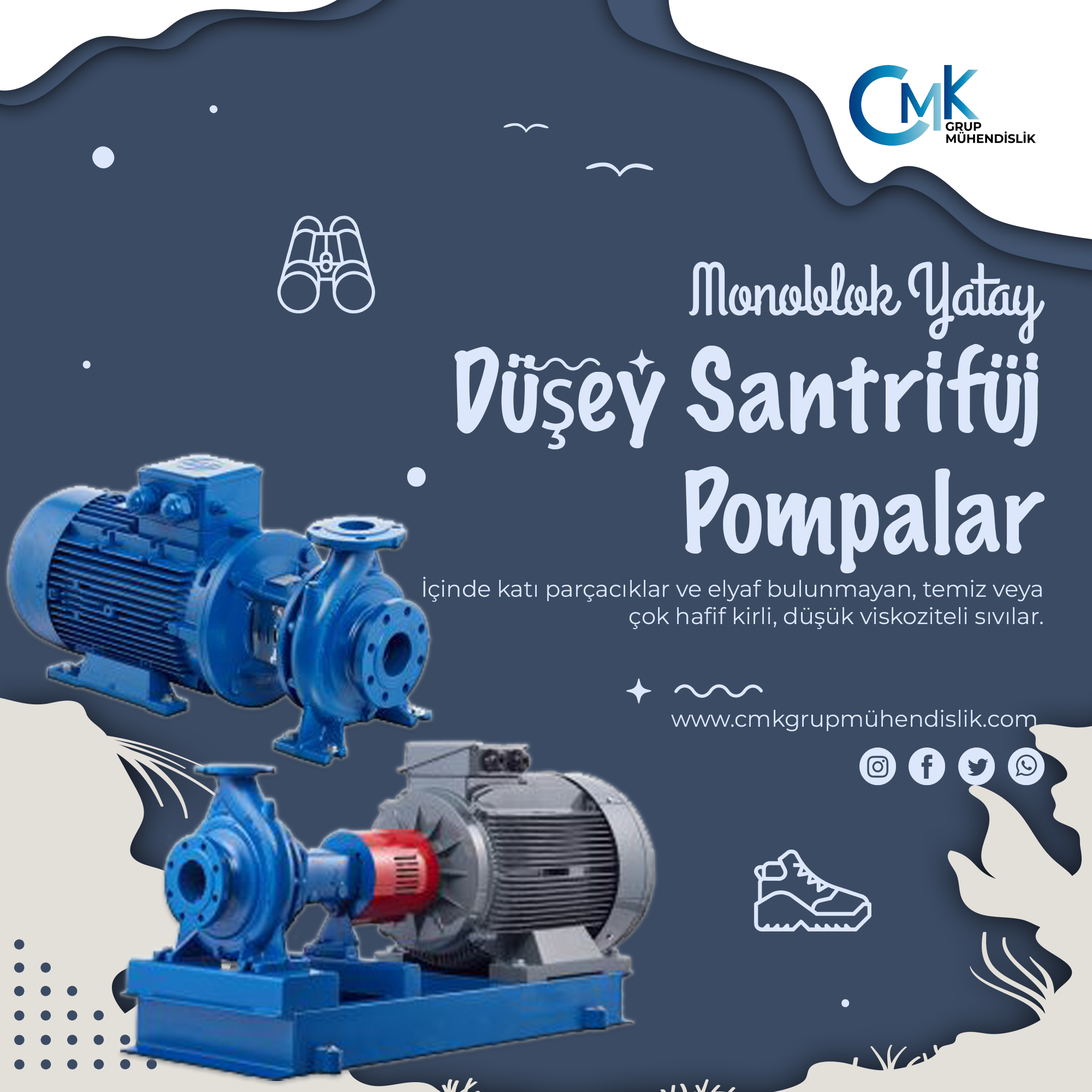
<style>
.page{position:relative;width:1092px;height:1092px;background:#3b4b64}
.page>*{position:absolute;margin:0}
.t1{font:73.8px "GrandHotel-Regular";letter-spacing:-0.025em;color:#dde7fb}
.t2{font:101.5px "MarkerFelt-Thin";letter-spacing:-0.025em;color:#dde7fb}
.t3{font:101.5px "MyriadPro-Regular";letter-spacing:-0.025em;color:#dde7fb}
.t4{font:22.7px "Montserrat-Regular";color:#dde7fb}
</style>
<div class="page">
<p class="t1" style="left:688px;top:262px;width:357px;height:82px">Monoblok Yatay</p>
<p class="t2" style="left:454px;top:344px;width:591px;height:229px;text-align:right">Dü<span class="t3">ş</span>ey Santrifüj<br>Pompalar</p>
<p class="t4" style="left:423px;top:577px;width:620px;height:53px;text-align:right">İçinde katı parçacıklar ve elyaf bulunmayan, temiz veya çok hafif kirli, düşük viskoziteli sıvılar.</p>
<p class="t4" style="left:671px;top:710px;width:365px;height:22px">www.cmkgrupmühendislik.com</p>
</div>
